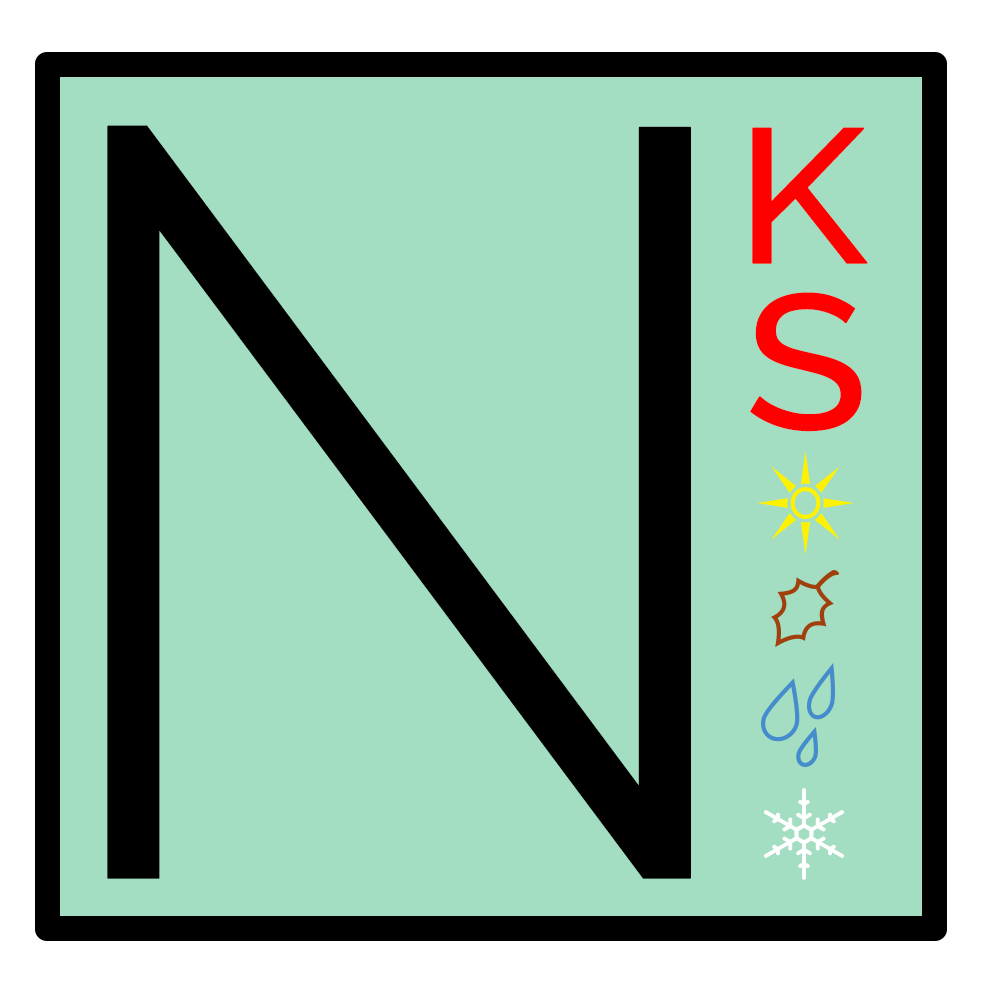
<style>
.page{position:relative;width:1000px;height:1000px;background:#a3ddc2}
.page>*{position:absolute;margin:0}
.t1{font:1058.4px "Raleway-Light";color:#000000;text-transform:uppercase;font-weight:bold;scale:0.94 1}
.t2{font:189.7px "Raleway-Medium";color:#ff0000;text-transform:uppercase;font-weight:bold;scale:1.05 1}
</style>
<div class="page">
<p class="t1" style="left:107px;top:125px;width:584px;height:754px">n</p>
<p class="t2" style="left:752px;top:127px;width:116px;height:137px">k</p>
<p class="t2" style="left:750px;top:292px;width:112px;height:140px">s</p>
</div>
